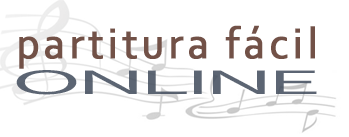
<style>
.page{position:relative;width:349px;height:137px;background:#ffffff}
.page>*{position:absolute;margin:0}
.t1{font:45px "Corbel";letter-spacing:0.075em;color:#725147;font-weight:bold;scale:0.96 1}
.t2{font:36px "Corbel";letter-spacing:-0.05em;color:#444f5f;scale:2.7 1}
</style>
<div class="page">
<p class="t1" style="left:19px;top:25px;width:296px;height:44px">partitura fácil</p>
<p class="t2" style="left:16px;top:70px;width:301px;height:25px;opacity:0.89">ONLINE</p>
</div>
